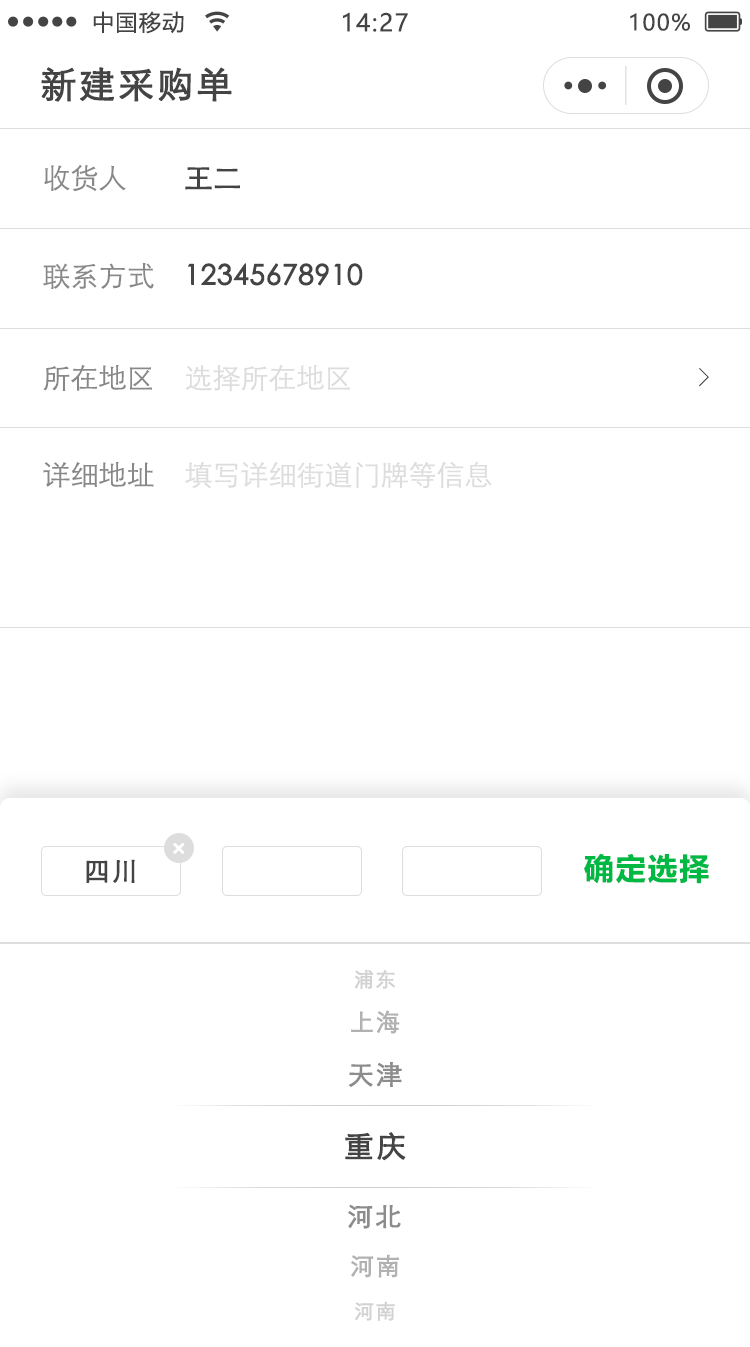
<style>
.page{position:relative;width:750px;height:1347px;background:#ffffff}
.page>*{position:absolute;margin:0}
.t1{font:22px "MicrosoftYaHei";letter-spacing:0.06em;color:#444444}
.t2{font:24px "MicrosoftYaHei";letter-spacing:0.06em;color:#444444}
.t3{font:36px "STXihei";letter-spacing:0.06em;color:#444444;font-weight:bold}
.t4{font:28px "STXihei";color:#888888}
.t5{font:28px "STXihei";color:#444444;font-weight:bold}
.t6{font:28px "STXihei";color:#dddddd}
.t7{font:26px "SimSun";color:#444444}
.t8{font:30px "MicrosoftYaHei-Bold";letter-spacing:0.06em;color:#00b945}
.t9{font:26px "STXihei";letter-spacing:0.06em;color:#444444;font-weight:bold}
.t10{font:20px "STXihei";letter-spacing:0.06em;color:#d2d2d2;font-weight:bold}
.t11{font:24px "STXihei";letter-spacing:0.06em;color:#b1b1b1;font-weight:bold}
.t12{font:26px "STXihei";letter-spacing:0.06em;color:#8c8c8c;font-weight:bold}
.t13{font:30px "STXihei";letter-spacing:0.06em;color:#444444;font-weight:bold}
</style>
<div class="page">
<p class="t1" style="left:93px;top:11px;width:91px;height:23px">中国移动</p>
<p class="t2" style="left:343px;top:12px;width:65px;height:20px">14:27</p>
<p class="t1" style="left:630px;top:13px;width:60px;height:18px">100%</p>
<p class="t3" style="left:41px;top:67px;width:191px;height:35px">新建采购单</p>
<p class="t4" style="left:44px;top:164px;width:82px;height:28px">收货人</p>
<p class="t5" style="left:185px;top:167px;width:55px;height:23px">王二</p>
<p class="t4" style="left:43px;top:262px;width:111px;height:27px">联系方式</p>
<p class="t5" style="left:188px;top:263px;width:175px;height:23px">12345678910</p>
<p class="t4" style="left:43px;top:364px;width:109px;height:27px">所在地区</p>
<p class="t6" style="left:185px;top:364px;width:165px;height:28px">选择所在地区</p>
<p class="t7" style="left:699px;top:368px;width:10px;height:19px">&gt;</p>
<p class="t4" style="left:43px;top:462px;width:111px;height:26px">详细地址</p>
<p class="t6" style="left:185px;top:461px;width:307px;height:28px">填写详细街道门牌等信息</p>
<p class="t8" style="left:584px;top:853px;width:125px;height:31px">确定选择</p>
<p class="t9" style="left:86px;top:859px;width:49px;height:24px">四川</p>
<p class="t10" style="left:354px;top:969px;width:41px;height:20px">浦东</p>
<p class="t11" style="left:351px;top:1010px;width:49px;height:24px">上海</p>
<p class="t12" style="left:349px;top:1061px;width:53px;height:26px">天津</p>
<p class="t13" style="left:345px;top:1132px;width:61px;height:29px">重庆</p>
<p class="t12" style="left:348px;top:1204px;width:53px;height:25px">河北</p>
<p class="t11" style="left:351px;top:1254px;width:48px;height:24px">河南</p>
<p class="t10" style="left:355px;top:1301px;width:40px;height:20px">河南</p>
</div>
